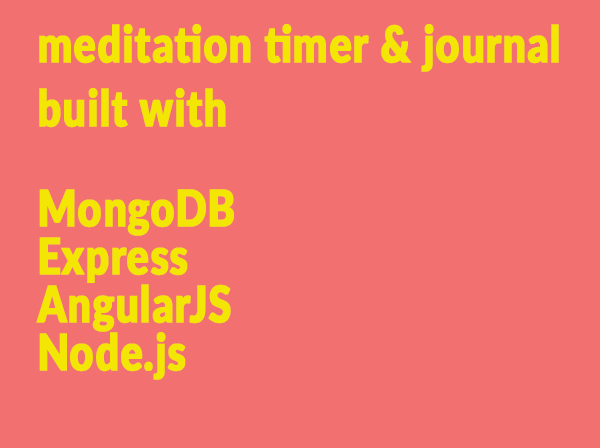
<style>
.page{position:relative;width:600px;height:448px;background:#f37070}
.page>*{position:absolute;margin:0}
.t1{font:50.4px/16px "Lato-Black";letter-spacing:0.01em;color:#f3e504;font-weight:bold;scale:0.81 1}
</style>
<div class="page">
<p class="t1" style="left:39px;top:24px;width:520px;height:104px">meditation timer &amp; journal<br><br><br><br>built with</p>
<p class="t1" style="left:36px;top:189px;width:198px;height:191px">MongoDB<br><br><br>Express<br><br><br>AngularJS<br><br><br>Node.js</p>
</div>
